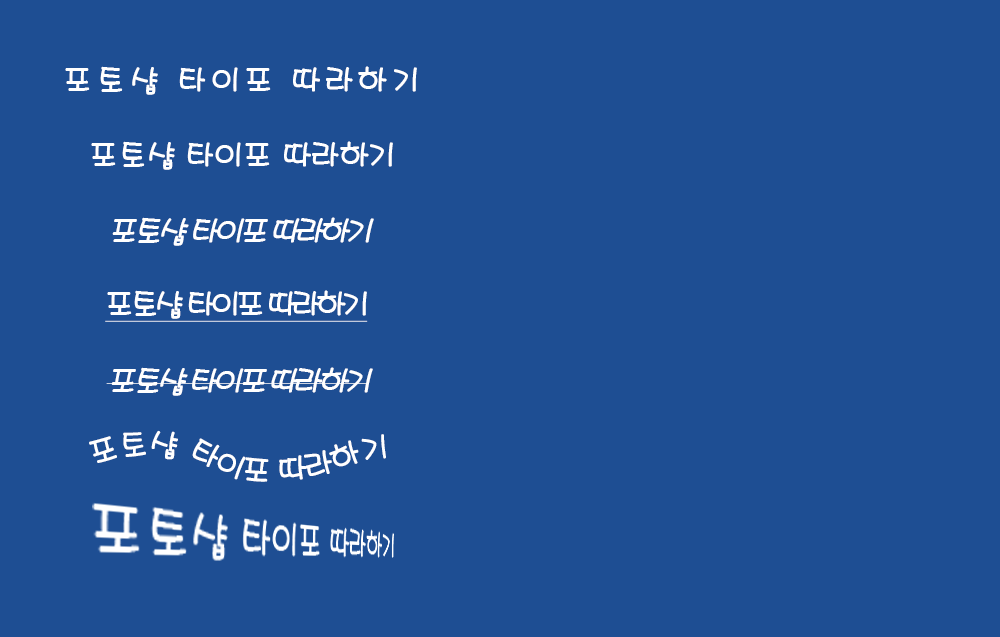
<style>
.page{position:relative;width:1000px;height:637px;background:#1e4e93}
.page>*{position:absolute;margin:0}
.t1{font:32px "DXRMbxB-KSCpc-EUC-H";letter-spacing:0.14em;color:#ffffff}
.t2{font:32px "DXRMbxB-KSCpc-EUC-H";color:#ffffff}
.t3{font:32px "DXRMbxB-KSCpc-EUC-H";letter-spacing:-0.12em;color:#ffffff;font-style:italic}
.t4{font:32px "DXRMbxB-KSCpc-EUC-H";letter-spacing:-0.12em;color:#ffffff;text-decoration:underline}
</style>
<div class="page">
<p class="t1" style="left:65px;top:66px;width:352px;height:29px">포토샵 타이포 따라하기</p>
<p class="t2" style="left:91px;top:141px;width:302px;height:29px">포토샵 타이포 따라하기</p>
<p class="t3" style="left:112px;top:217px;width:262px;height:29px">포토샵 타이포 따라하기</p>
<p class="t4" style="left:105px;top:290px;width:263px;height:32px">포토샵 타이포 따라하기</p>
<p class="t3" style="left:106px;top:367px;width:267px;height:29px">포토샵 타이포 따라하기</p>
<p class="t2" style="left:89px;top:430px;width:297px;height:52px">포토샵 타이포 따라하기</p>
</div>
